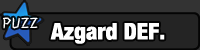
<style>
.page{position:relative;width:200px;height:50px;background:#242424}
.page>*{position:absolute;margin:0}
.t1{font:14px "HYsnrL";color:#ffffff}
.t2{font:23px "HelveticaNeueLT-BlackCond";color:#ffffff}
</style>
<div class="page">
<p class="t1" style="left:3px;top:17px;width:35px;height:12px">PUZZ</p>
<p class="t2" style="left:50px;top:23px;width:115px;height:21px">Azgard DEF.</p>
</div>
